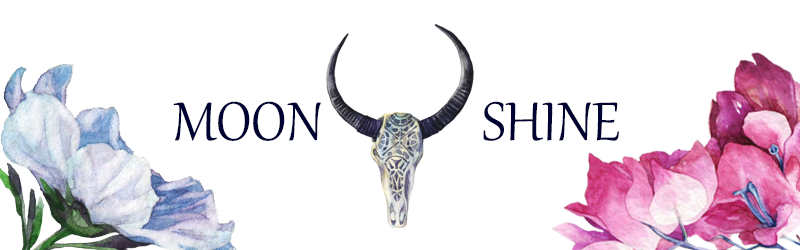
<style>
.page{position:relative;width:800px;height:250px;background:#ffffff}
.page>*{position:absolute;margin:0}
.t1{font:66.7px "Gabriola";color:#000231}
</style>
<div class="page">
<p class="t1" style="left:173px;top:101px;width:148px;height:40px">MOON</p>
<p class="t1" style="left:483px;top:101px;width:136px;height:40px">SHINE</p>
</div>
